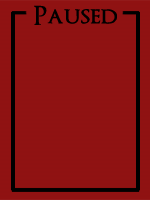
<style>
.page{position:relative;width:150px;height:200px;background:#8f1212}
.page>*{position:absolute;margin:0}
.t1{font:25.3px "OptimusPrincepsSemiBold";color:#000000}
</style>
<div class="page">
<p class="t1" style="left:34px;top:5px;width:83px;height:20px">Paused</p>
</div>
